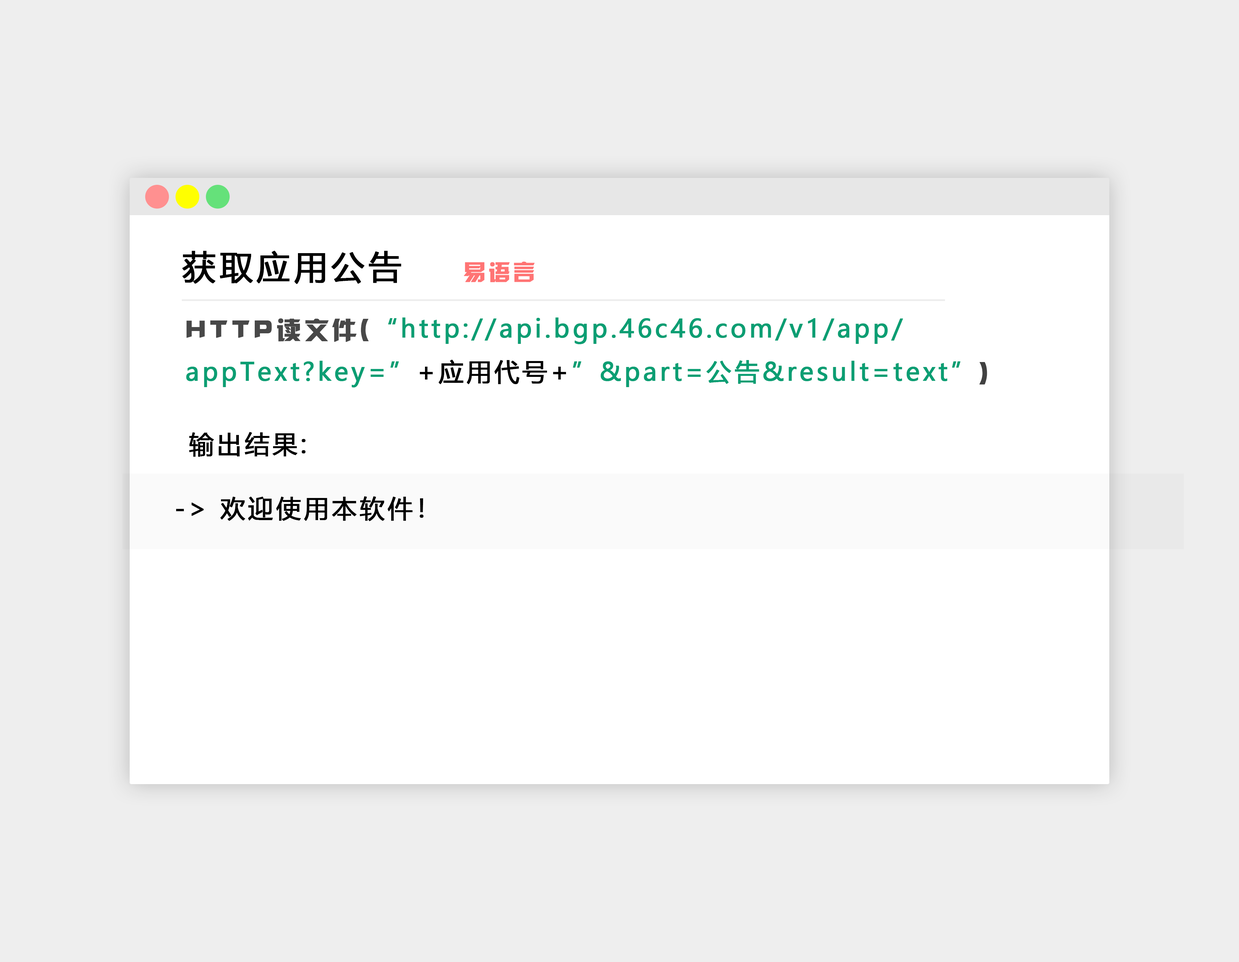
<style>
.page{position:relative;width:1239px;height:962px;background:#eeeeee}
.page>*{position:absolute;margin:0}
.t1{font:33px "MicrosoftYaHei";letter-spacing:0.1em;color:#000000;font-weight:bold}
.t2{font:22px "JLinXin";letter-spacing:0.1em;color:#ff7474;font-weight:bold}
.t3{font:24.8px "MicrosoftYaHei";letter-spacing:0.1em;color:#0b9e73;font-weight:bold}
.t4{font:24.8px "JLinXin";letter-spacing:0.1em;color:#484848;font-weight:bold}
.t5{font:24.8px "MicrosoftYaHei";letter-spacing:0.1em;color:#000000;font-weight:bold}
.t6{font:24.8px "JLinXin";letter-spacing:0.1em;color:#414141;font-weight:bold}
</style>
<div class="page">
<p class="t1" style="left:182px;top:251px;width:219px;height:33px">获取应用公告</p>
<p class="t2" style="left:464px;top:261px;width:71px;height:21px">易语言</p>
<p class="t3" style="left:186px;top:318px;width:802px;height:69px"><span class="t4">HTTP读文件(</span>“http://api.bgp.46c46.com/v1/app/<br>appText?key=”<span class="t5">+应用代号+</span>”&amp;part=公告&amp;result=text”<span class="t6">)</span></p>
<p class="t5" style="left:189px;top:432px;width:117px;height:25px">输出结果:</p>
<p class="t5" style="left:176px;top:496px;width:248px;height:25px">-&gt; 欢迎使用本软件！</p>
</div>
